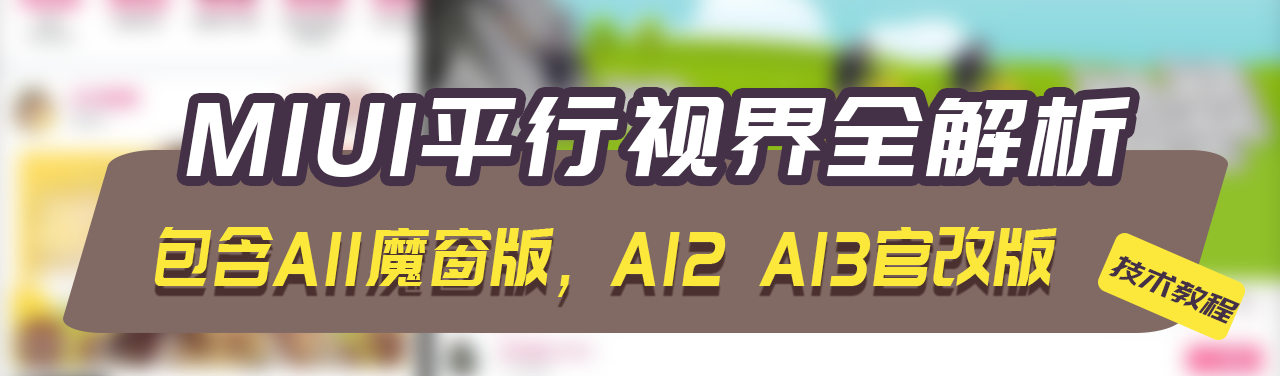
<style>
.page{position:relative;width:1280px;height:376px;background:#816964}
.page>*{position:absolute;margin:0}
.t1{font:108.8px "PangMenZhengDao";letter-spacing:0.05em;color:#ffffff;font-style:italic;scale:0.92 1}
.t2{font:81.3px "PangMenZhengDao";letter-spacing:0.05em;color:#fbe83a;font-style:italic;scale:0.77 1}
.t3{font:33.1px "PangMenZhengDao";letter-spacing:0.05em;color:#443147;font-style:italic}
</style>
<div class="page">
<p class="t1" style="left:186px;top:97px;width:944px;height:80px">MIUI平行视界全解析</p>
<p class="t2" style="left:154px;top:227px;width:903px;height:70px">包含A11魔窗版，A12 A13官改版</p>
<p class="t3" style="left:1108px;top:256px;width:132px;height:68px;rotate:23deg">技术教程</p>
</div>
